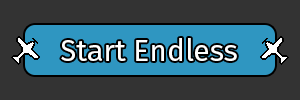
<style>
.page{position:relative;width:300px;height:100px;background:#333333}
.page>*{position:absolute;margin:0}
.t1{font:30px "FiraSans-Regular";color:#ffffff}
</style>
<div class="page">
<p class="t1" style="left:61px;top:38px;width:176px;height:23px">Start Endless</p>
</div>
